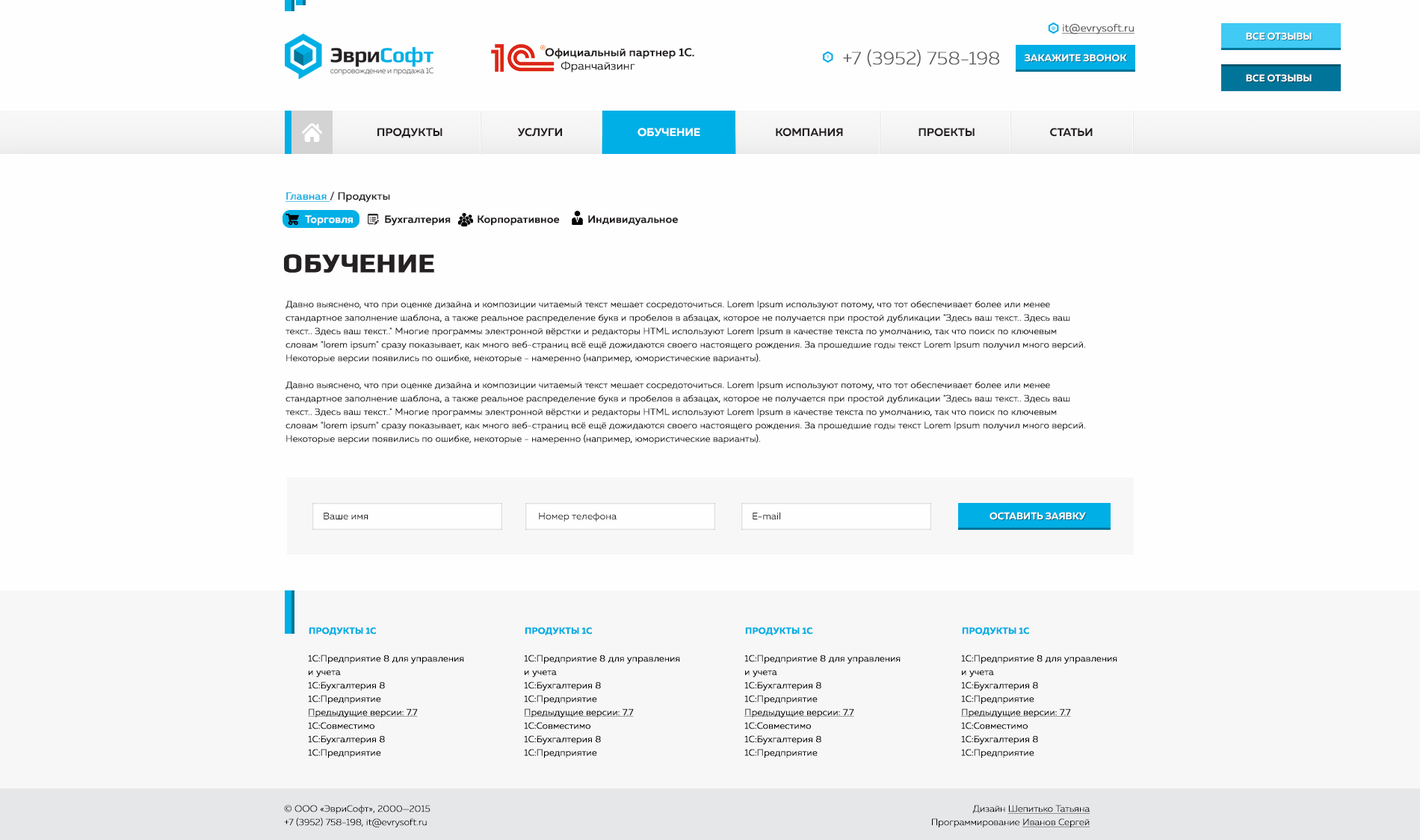
<style>
.page{position:relative;width:1420px;height:840px;background:#fefefe}
.page>*{position:absolute;margin:0}
.t1{font:10.5px "MullerLight";color:#5c595a;font-weight:bold;text-decoration:underline}
.t2{font:9.8px "MullerBold";color:#ffffff}
.t3{font:11.2px/13.5px "MullerMedium";color:#231f20;font-weight:bold}
.t4{font:11.2px/13.5px "MullerLight";color:#231f20;font-weight:bold}
.t5{font:18.3px "MullerUltraLight";color:#5c595a;font-weight:bold}
.t6{font:11.2px "MullerBold";color:#231f20}
.t7{font:11.2px "MullerBold";color:#ffffff}
.t8{font:10.5px "MullerRegular";color:#252122;font-weight:bold}
.t9{font:10.5px "MullerRegular";color:#00afe5;font-weight:bold;text-decoration:underline}
.t10{font:10.5px "MullerMedium";color:#fbfbfb;font-weight:bold}
.t11{font:10.5px "MullerMedium";color:#231f20;font-weight:bold}
.t12{font:26.9px "Play-Bold";color:#252122;font-weight:bold}
.t13{font:9px/13.5px "MullerLight";color:#252122;font-weight:bold}
.t14{font:9.7px "MullerRegular";color:#252122}
.t15{font:9.8px "MullerBold";color:#ffffff;text-transform:uppercase}
.t16{font:9px "MullerBold";color:#00afe5;font-weight:bold}
.t17{font:9px/13.5px "MullerLight";color:#000000;font-weight:bold}
.t18{font:9px/13.5px "MullerLight";color:#000000;font-weight:bold;text-decoration:underline}
.t19{font:9px/13.5px "MullerUltraLight";color:#000000;font-weight:bold}
.t20{font:9px/13.5px "MullerUltraLight";color:#000000;font-weight:bold;text-decoration:underline}
</style>
<div class="page">
<p class="t1" style="left:1062px;top:24px;width:72px;height:10px">it@evrysoft.ru</p>
<p class="t2" style="left:1246px;top:32px;width:65px;height:8px">ВСЕ ОТЗЫВЫ</p>
<p class="t3" style="left:545px;top:48px;width:149px;height:24px">Официальный партнер 1С.<span class="t4"> <br>     Франчайзинг</span></p>
<p class="t5" style="left:843px;top:49px;width:156px;height:18px">+7 (3952) 758-198</p>
<p class="t2" style="left:1024px;top:54px;width:103px;height:8px">ЗАКАЖИТЕ ЗВОНОК</p>
<p class="t2" style="left:1246px;top:74px;width:65px;height:8px">ВСЕ ОТЗЫВЫ</p>
<p class="t6" style="left:377px;top:128px;width:715px;height:10px">ПРОДУКТЫ                              УСЛУГИ                         <span class="t7">     ОБУЧЕНИЕ</span>                              КОМПАНИЯ                              ПРОЕКТЫ                              СТАТЬИ</p>
<p class="t8" style="left:285px;top:191px;width:105px;height:12px"><span class="t9">Главная </span>/ Продукты</p>
<p class="t10" style="left:305px;top:215px;width:48px;height:11px">Торговля</p>
<p class="t11" style="left:385px;top:215px;width:66px;height:11px">Бухгалтерия</p>
<p class="t11" style="left:477px;top:215px;width:83px;height:11px">Корпоративное</p>
<p class="t11" style="left:588px;top:215px;width:90px;height:11px">Индивидуальное</p>
<p class="t12" style="left:284px;top:254px;width:150px;height:19px">ОБУЧЕНИЕ</p>
<p class="t13" style="left:285px;top:300px;width:801px;height:144px">Давно выяснено, что при оценке дизайна и композиции читаемый текст мешает сосредоточиться. Lorem Ipsum используют потому, что тот обеспечивает более или менее стандартное заполнение шаблона, а также реальное распределение букв и пробелов в абзацах, которое не получается при простой дубликации "Здесь ваш текст.. Здесь ваш текст.. Здесь ваш текст.." Многие программы электронной вёрстки и редакторы HTML используют Lorem Ipsum в качестве текста по умолчанию, так что поиск по ключевым словам "lorem ipsum" сразу показывает, как много веб-страниц всё ещё дожидаются своего настоящего рождения. За прошедшие годы текст Lorem Ipsum получил много версий. Некоторые версии появились по ошибке, некоторые - намеренно (например, юмористические варианты).<br><br>Давно выяснено, что при оценке дизайна и композиции читаемый текст мешает сосредоточиться. Lorem Ipsum используют потому, что тот обеспечивает более или менее стандартное заполнение шаблона, а также реальное распределение букв и пробелов в абзацах, которое не получается при простой дубликации "Здесь ваш текст.. Здесь ваш текст.. Здесь ваш текст.." Многие программы электронной вёрстки и редакторы HTML используют Lorem Ipsum в качестве текста по умолчанию, так что поиск по ключевым словам "lorem ipsum" сразу показывает, как много веб-страниц всё ещё дожидаются своего настоящего рождения. За прошедшие годы текст Lorem Ipsum получил много версий. Некоторые версии появились по ошибке, некоторые - намеренно (например, юмористические варианты).</p>
<p class="t14" style="left:324px;top:513px;width:44px;height:7px">Ваше имя</p>
<p class="t14" style="left:539px;top:513px;width:77px;height:9px">Номер телефона</p>
<p class="t14" style="left:752px;top:512px;width:28px;height:8px">E-mail</p>
<p class="t15" style="left:989px;top:512px;width:97px;height:8px">ОСтавить заявку</p>
<p class="t16" style="left:309px;top:627px;width:67px;height:8px">ПРОДУКТЫ 1С</p>
<p class="t16" style="left:525px;top:627px;width:67px;height:8px">ПРОДУКТЫ 1С</p>
<p class="t16" style="left:745px;top:627px;width:67px;height:8px">ПРОДУКТЫ 1С</p>
<p class="t16" style="left:962px;top:627px;width:67px;height:8px">ПРОДУКТЫ 1С</p>
<p class="t17" style="left:308px;top:655px;width:156px;height:103px">1С:Предприятие 8 для управления и учета<br>1С:Бухгалтерия 8 <br>1С:Предприятие <br><span class="t18">Предыдущие версии: 7.7<br></span>1С:Совместимо<br>1С:Бухгалтерия 8 <br>1С:Предприятие</p>
<p class="t17" style="left:524px;top:655px;width:156px;height:103px">1С:Предприятие 8 для управления и учета<br>1С:Бухгалтерия 8 <br>1С:Предприятие <br><span class="t18">Предыдущие версии: 7.7<br></span>1С:Совместимо<br>1С:Бухгалтерия 8 <br>1С:Предприятие</p>
<p class="t17" style="left:744px;top:655px;width:156px;height:103px">1С:Предприятие 8 для управления и учета<br>1С:Бухгалтерия 8 <br>1С:Предприятие <br><span class="t18">Предыдущие версии: 7.7<br></span>1С:Совместимо<br>1С:Бухгалтерия 8 <br>1С:Предприятие</p>
<p class="t17" style="left:961px;top:655px;width:156px;height:103px">1С:Предприятие 8 для управления и учета<br>1С:Бухгалтерия 8 <br>1С:Предприятие <br><span class="t18">Предыдущие версии: 7.7<br></span>1С:Совместимо<br>1С:Бухгалтерия 8 <br>1С:Предприятие</p>
<p class="t19" style="left:284px;top:805px;width:146px;height:22px">© ООО «ЭвриСофт», 2000—2015<br>+7 (3952) 758-198, it@evrysoft.ru</p>
<p class="t20" style="left:932px;top:805px;width:158px;height:22px;text-align:right"><span class="t19">Дизайн </span>Шепитько Татьяна<br><span class="t19">Программирование </span>Иванов Сергей</p>
</div>
